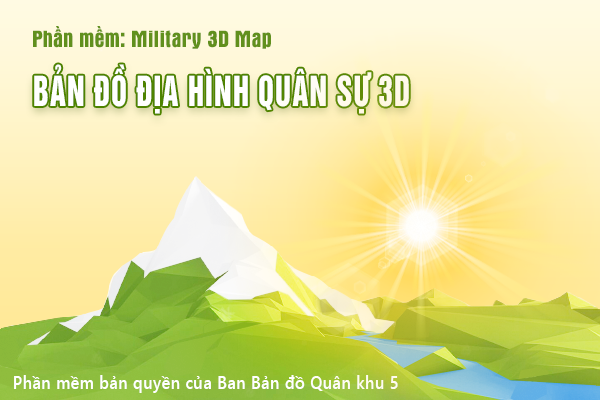
<style>
.page{position:relative;width:600px;height:400px}
.page>*{position:absolute;margin:0}
.t1{font:23.9px "UTM-Aurora";letter-spacing:0.005em;color:#61901d}
.t2{font:37.9px "UTM-HelvetIns";letter-spacing:0.045em;color:#ffffff;scale:0.75 1}
.t3{font:17.8px "SegoeUI-Semibold";letter-spacing:0.045em;color:#ffffff;scale:0.88 1}
</style>
<div class="page">
<p class="t1" style="left:33px;top:26px;width:238px;height:23px">Phần mềm: Military 3D Map</p>
<p class="t2" style="left:34px;top:64px;width:375px;height:50px">BẢN ĐỒ ĐỊA HÌNH QUÂN SỰ 3D</p>
<p class="t3" style="left:14px;top:375px;width:384px;height:18px">Phần mềm bản quyền của Ban Bản đồ Quân khu 5</p>
</div>
